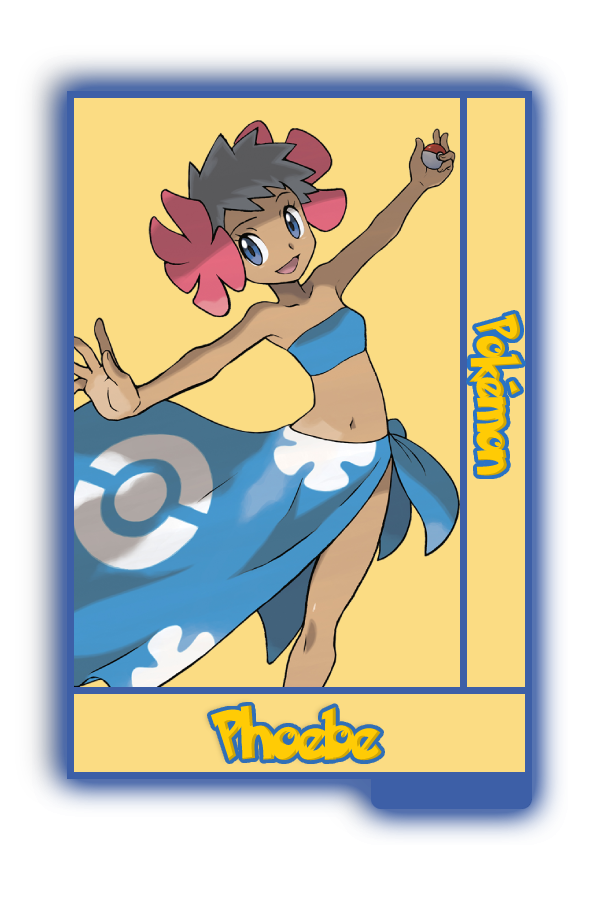
<style>
.page{position:relative;width:600px;height:900px;background:#fbdc83}
.page>*{position:absolute;margin:0}
.t1{font:48.8px "PokemonSolidNormal";color:#ffcb05;scale:0.8 1}
.t2{font:56.6px "PokemonSolidNormal";color:#ffcb05;scale:0.92 1}
</style>
<div class="page">
<p class="t1" style="left:469px;top:313px;width:54px;height:163px;rotate:90deg">Pokémon</p>
<p class="t2" style="left:210px;top:705px;width:172px;height:56px">Phoebe</p>
</div>
